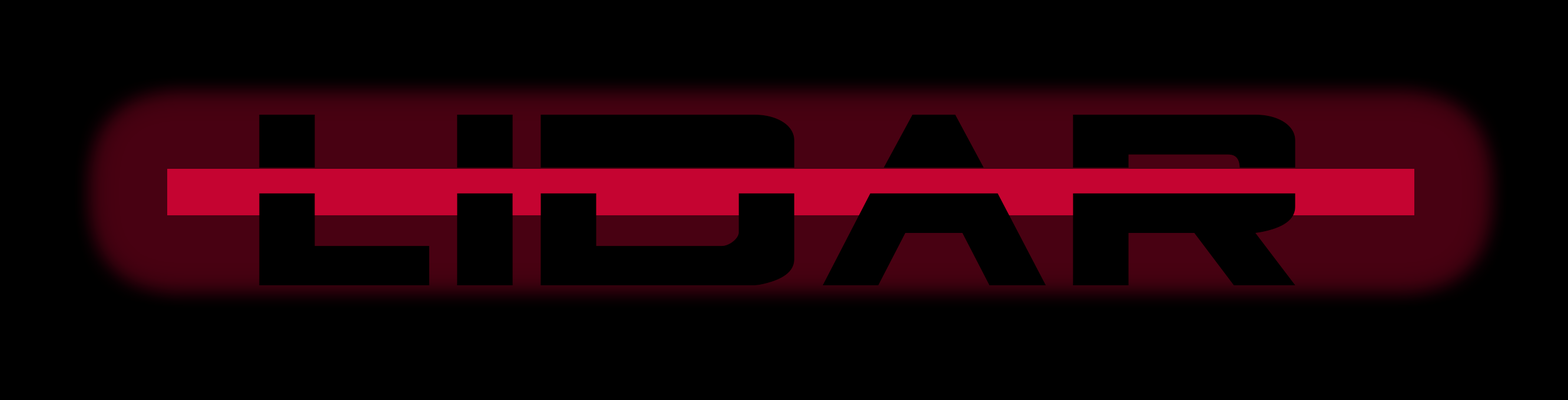
<style>
.page{position:relative;width:1568px;height:400px;background:#000000}
.page>*{position:absolute;margin:0}
.t1{font:250.8px "BorgNine-Regular";color:#000000;scale:1.06 1}
</style>
<div class="page">
<p class="t1" style="left:259px;top:114px;width:1036px;height:172px">LiDAR</p>
</div>
